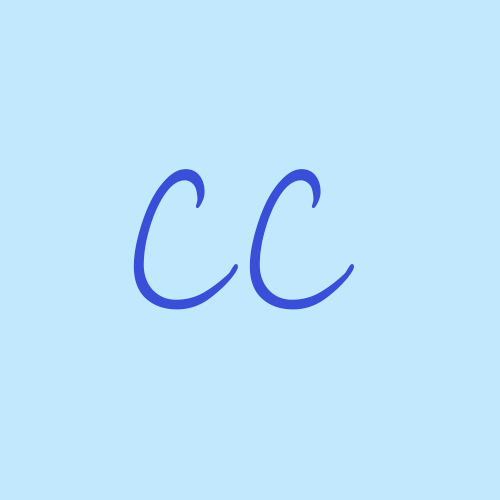
<style>
.page{position:relative;width:500px;height:500px;background:#c1e8fc}
.page>*{position:absolute;margin:0}
.t1{font:211.7px "InkFree";color:#394fd8}
</style>
<div class="page">
<p class="t1" style="left:133px;top:169px;width:221px;height:141px">CC</p>
</div>
